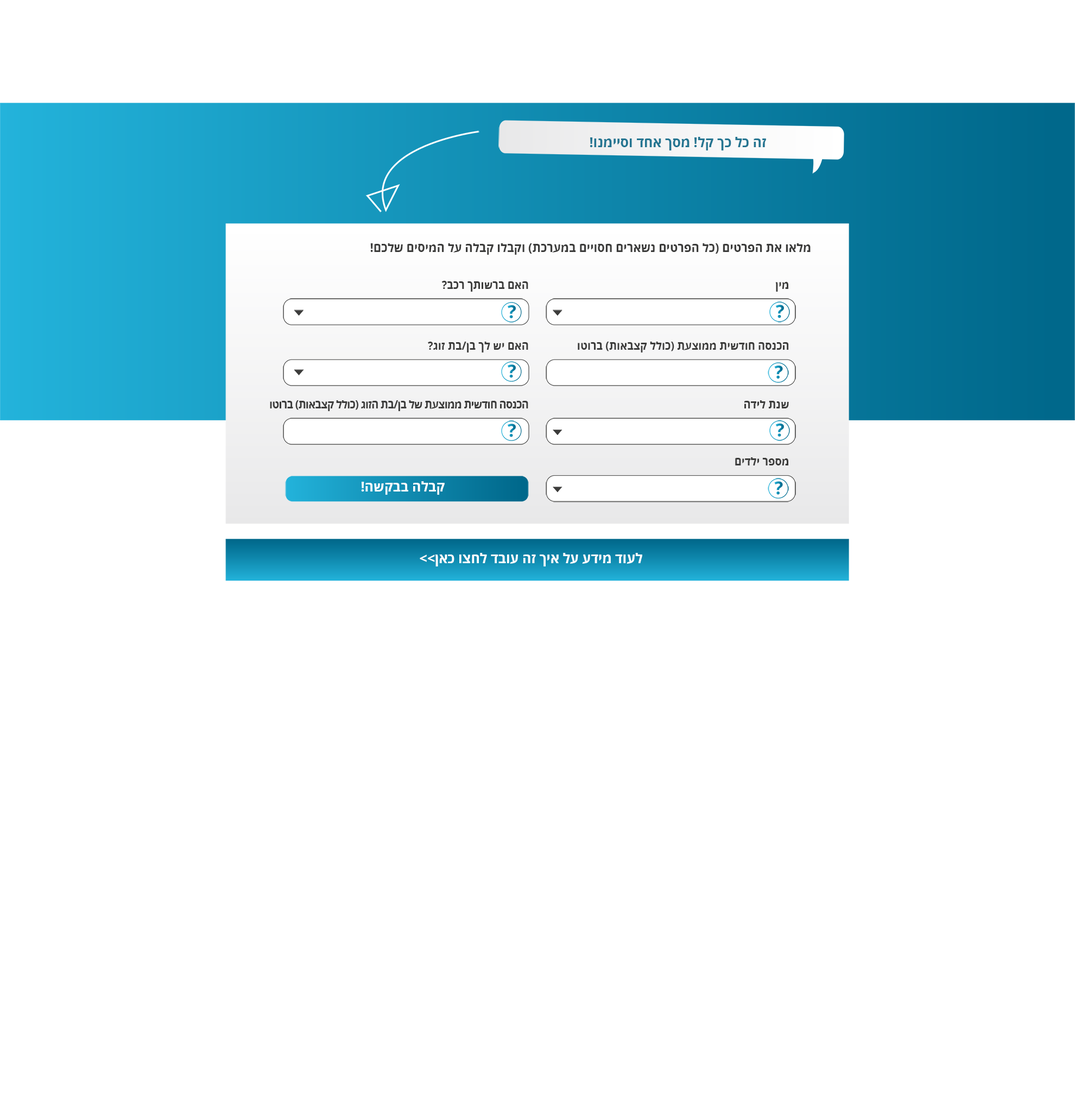
<style>
.page{position:relative;width:1075px;height:1109px;background:#ffffff}
.page>*{position:absolute;margin:0}
.t1{font:13.6px "OpenSansHebrew-Bold";color:#247591}
.t2{font:11.9px "OpenSansHebrew-Bold";color:#3c3c3b}
.t3{font:10.9px "OpenSansHebrew-Bold";color:#3c3c3b}
.t4{font:10.9px "OpenSansHebrew-Bold";letter-spacing:-0.04em;color:#3c3c3b}
.t5{font:13.6px "OpenSansHebrew-Bold";color:#ffffff}
</style>
<div class="page">
<p class="t1" style="left:590px;top:137px;width:176px;height:13px">!ונמייסו דחא ךסמ !לק ךכ לכ הז</p>
<p class="t2" style="left:370px;top:243px;width:441px;height:12px">מלאו את הפרטים (כל הפרטים נשארים חסויים במערכת) וקבלו קבלה על המיסים שלכם!</p>
<p class="t3" style="left:442px;top:281px;width:86px;height:11px">האם ברשותך רכב?</p>
<p class="t3" style="left:776px;top:282px;width:13px;height:10px">מין</p>
<p class="t3" style="left:428px;top:342px;width:100px;height:10px">האם יש לך בן/בת זוג?</p>
<p class="t3" style="left:578px;top:342px;width:211px;height:10px">הכנסה חודשית ממוצעת (כולל קצבאות) ברוטו</p>
<p class="t4" style="left:270px;top:400px;width:258px;height:11px">הכנסה חודשית ממוצעת של בן/בת הזוג (כולל קצבאות) ברוטו</p>
<p class="t3" style="left:745px;top:400px;width:44px;height:8px">שנת לידה</p>
<p class="t3" style="left:735px;top:457px;width:54px;height:8px">מספר ילדים</p>
<p class="t5" style="left:361px;top:481px;width:84px;height:14px">קבלה בבקשה!</p>
<p class="t5" style="left:420px;top:553px;width:222px;height:13px">לעוד מידע על איך זה עובד לחצו כאן&gt;&gt;</p>
</div>
